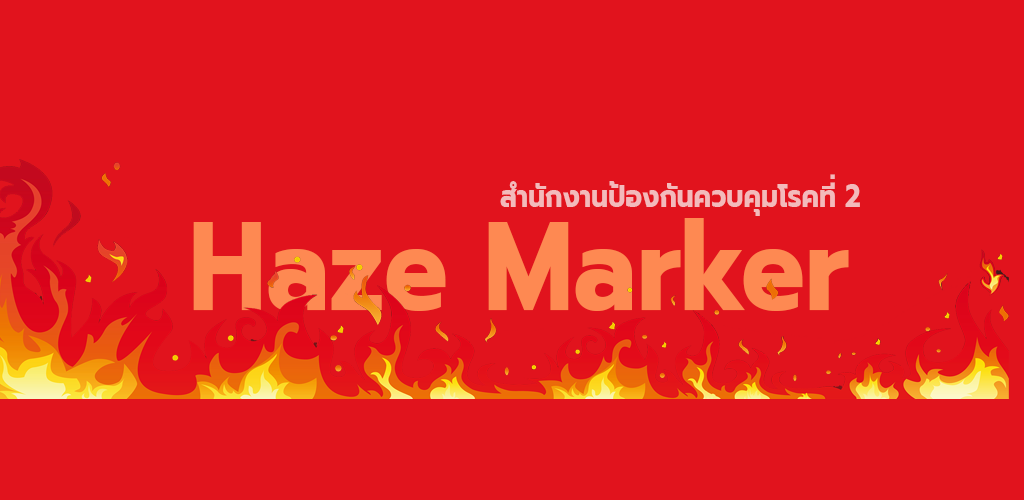
<style>
.page{position:relative;width:1024px;height:500px;background:#e1131d}
.page>*{position:absolute;margin:0}
.t1{font:31.4px "Prompt-Bold";color:#f3babb;scale:0.85 1}
.t2{font:125.5px "Prompt-Bold";color:#fe8952;scale:0.85 1}
</style>
<div class="page">
<p class="t1" style="left:500px;top:174px;width:360px;height:42px">สำนักงานป้องกันควบคุมโรคที่ 2</p>
<p class="t2" style="left:193px;top:218px;width:656px;height:93px">Haze Marker</p>
</div>
